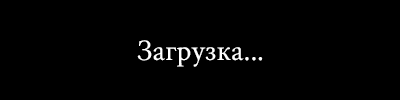
<style>
.page{position:relative;width:400px;height:100px;background:#000000}
.page>*{position:absolute;margin:0}
.t1{font:30px "CrimsonText-Regular";color:#ffffff}
</style>
<div class="page">
<p class="t1" style="left:137px;top:40px;width:126px;height:27px">Загрузка...</p>
</div>
